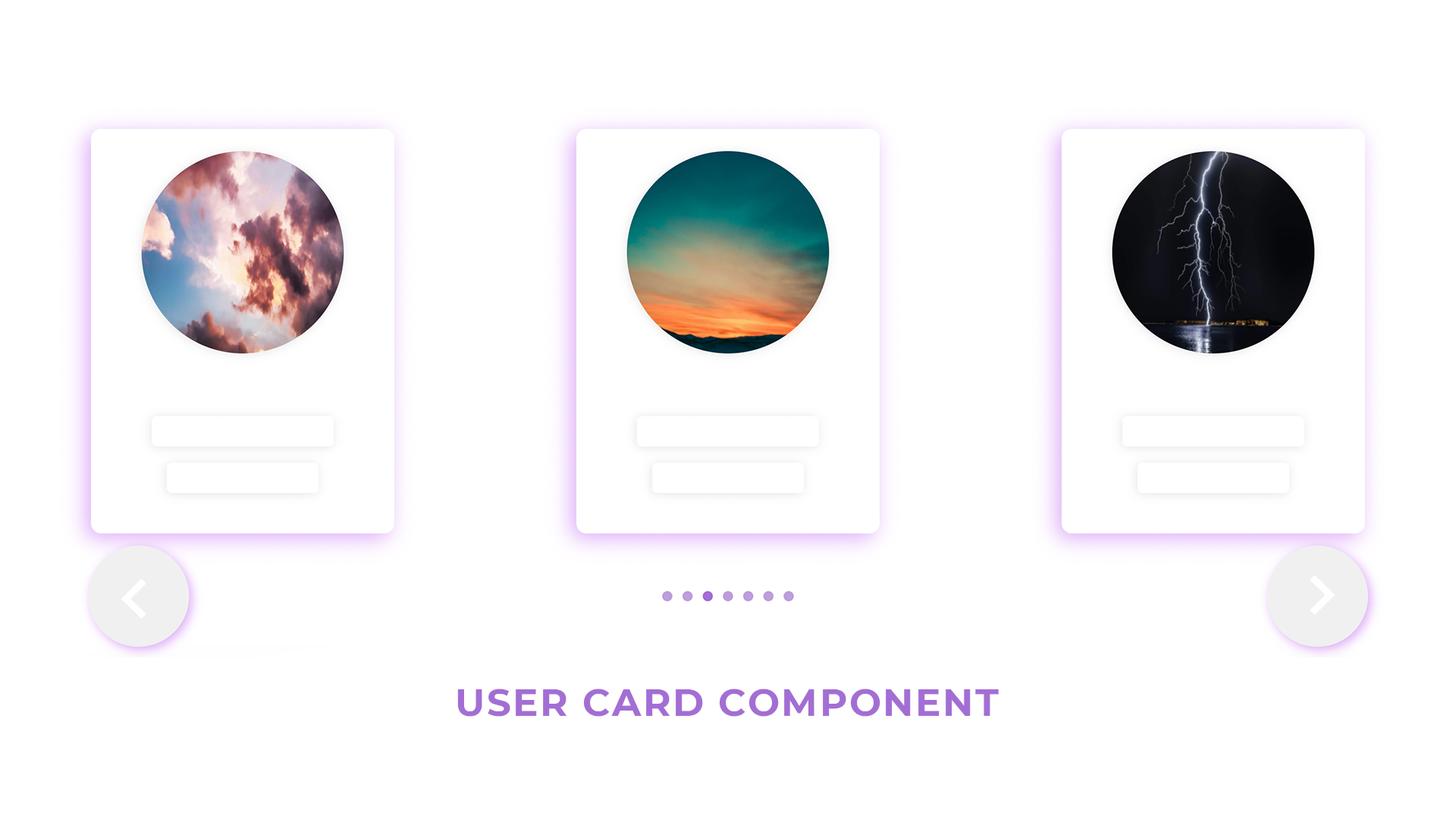
<style>
.page{position:relative;width:1456px;height:819px;background:#ffffff}
.page>*{position:absolute;margin:0}
.t1{font:37.9px "Montserrat-Bold";letter-spacing:0.05em;color:#a36ed4;text-transform:uppercase}
</style>
<div class="page">
<p class="t1" style="left:457px;top:689px;width:542px;height:28px">user card component</p>
</div>
